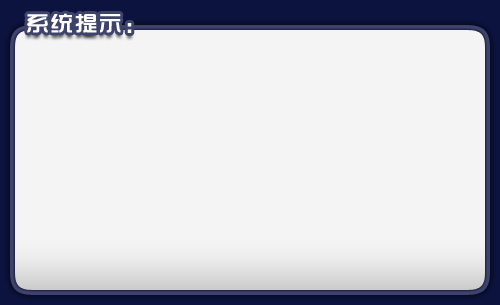
<style>
.page{position:relative;width:500px;height:305px;background:#f4f4f4}
.page>*{position:absolute;margin:0}
.t1{font:22px "TRENDS";letter-spacing:0.08em;color:#feffff;font-weight:bold}
</style>
<div class="page">
<p class="t1" style="left:27px;top:13px;width:105px;height:20px">系统提示：</p>
</div>
